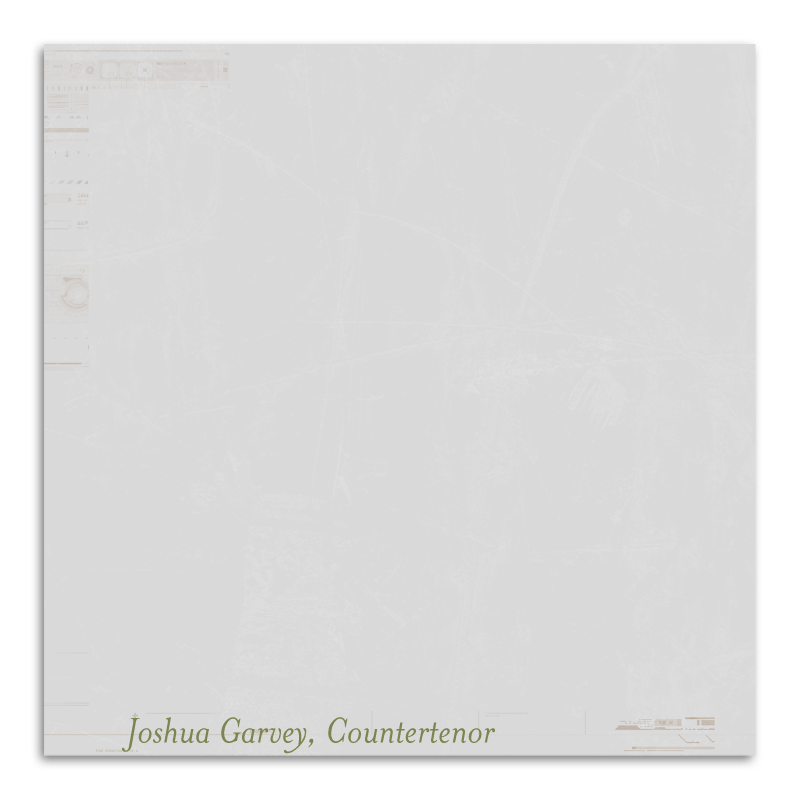
<style>
.page{position:relative;width:800px;height:800px;background:#d9d9d9}
.page>*{position:absolute;margin:0}
.t1{font:40.9px "MrsEavesItalic";color:#7a8550}
</style>
<div class="page">
<p class="t1" style="left:122px;top:717px;width:373px;height:37px">Joshua Garvey, Countertenor</p>
</div>
